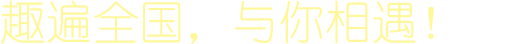
<style>
.page{position:relative;width:511px;height:44px;background:#ffffff}
.page>*{position:absolute;margin:0}
.t1{font:46px "YouYuan";letter-spacing:0.01em;color:#fff799}
</style>
<div class="page">
<p class="t1" style="left:1px;top:0px;width:433px;height:45px">趣遍全国，与你相遇！</p>
</div>
